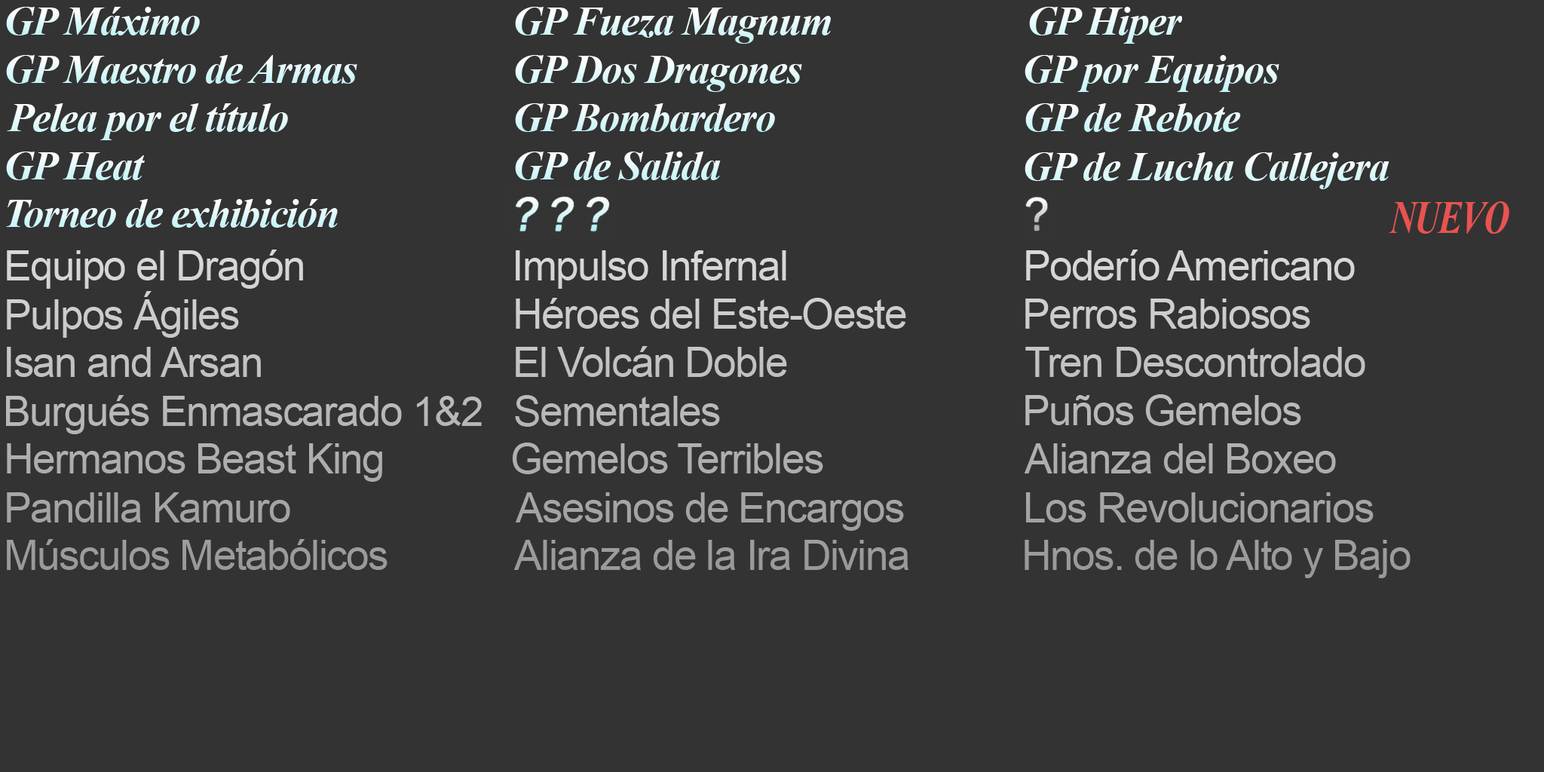
<style>
.page{position:relative;width:1544px;height:772px;background:#333333}
.page>*{position:absolute;margin:0}
.t1{font:41.8px "TimesNewRomanPS-BoldItalicMT";letter-spacing:-0.03em;color:#def9fb}
.t2{font:41.8px "TimesNewRomanPS-BoldItalicMT";letter-spacing:-0.03em;color:#e6fafc}
.t3{font:41.8px "TimesNewRomanPS-BoldItalicMT";letter-spacing:-0.03em;color:#e9fbfc}
.t4{font:41.8px "TimesNewRomanPS-BoldItalicMT";letter-spacing:-0.03em;color:#dcf8fb}
.t5{font:41.8px "TimesNewRomanPS-BoldItalicMT";letter-spacing:-0.03em;color:#e4fafc}
.t6{font:41.5px "TimesNewRomanPS-BoldItalicMT";letter-spacing:-0.03em;color:#dcf8fb}
.t7{font:41.8px "TimesNewRomanPS-BoldItalicMT";letter-spacing:-0.03em}
.t8{font:41.8px "TimesNewRomanPS-BoldItalicMT";letter-spacing:-0.03em;color:#daf8fb}
.t9{font:47.1px "TimesNewRomanPS-BoldItalicMT";letter-spacing:-0.03em;color:#e85350;scale:0.75 1}
.t10{font:41.4px "ArialMT";letter-spacing:-0.03em;color:#d6d6d6}
.t11{font:41.4px "ArialMT";letter-spacing:-0.03em;color:#cccccc}
.t12{font:41.4px "ArialMT";letter-spacing:-0.03em;color:#c2c2c2}
.t13{font:41.4px "ArialMT";letter-spacing:-0.03em;color:#b8b8b8}
.t14{font:41.4px "ArialMT";letter-spacing:-0.03em;color:#aeaeae}
.t15{font:41.4px "ArialMT";letter-spacing:-0.03em;color:#a4a4a4}
.t16{font:41.4px "ArialMT";letter-spacing:-0.03em;color:#9b9b9b}
.t17{font:41.4px "ArialMT";letter-spacing:-0.03em;color:#9a9a9a}
</style>
<div class="page">
<p class="t1" style="left:6px;top:7px;width:194px;height:28px">GP Máximo</p>
<p class="t2" style="left:515px;top:7px;width:316px;height:37px">GP Fueza Magnum</p>
<p class="t3" style="left:1029px;top:7px;width:153px;height:37px">GP Hiper</p>
<p class="t4" style="left:6px;top:55px;width:351px;height:29px">GP Maestro de Armas</p>
<p class="t2" style="left:515px;top:55px;width:287px;height:37px">GP Dos Dragones</p>
<p class="t5" style="left:1025px;top:55px;width:255px;height:37px">GP por Equipos</p>
<p class="t5" style="left:7px;top:103px;width:281px;height:37px">Pelea por el título</p>
<p class="t6" style="left:515px;top:103px;width:260px;height:29px">GP Bombardero</p>
<p class="t1" style="left:1026px;top:103px;width:215px;height:29px">GP de Rebote</p>
<p class="t7" style="left:6px;top:152px;width:139px;height:28px">GP Heat</p>
<p class="t1" style="left:515px;top:152px;width:206px;height:28px">GP de Salida</p>
<p class="t5" style="left:1025px;top:152px;width:365px;height:37px">GP de Lucha Callejera</p>
<p class="t8" style="left:6px;top:199px;width:332px;height:29px">Torneo de exhibición</p>
<p class="t9" style="left:1389px;top:201px;width:121px;height:33px">NUEVO</p>
<p class="t10" style="left:7px;top:250px;width:296px;height:39px">Equipo el Dragón</p>
<p class="t10" style="left:516px;top:250px;width:270px;height:39px">Impulso Infernal</p>
<p class="t10" style="left:1026px;top:250px;width:329px;height:31px">Poderío Americano</p>
<p class="t11" style="left:7px;top:291px;width:232px;height:47px">Pulpos Ágiles</p>
<p class="t11" style="left:516px;top:298px;width:390px;height:32px">Héroes del Este-Oeste</p>
<p class="t11" style="left:1026px;top:299px;width:285px;height:30px">Perros Rabiosos</p>
<p class="t12" style="left:7px;top:347px;width:254px;height:30px">Isan and Arsan</p>
<p class="t12" style="left:516px;top:346px;width:271px;height:31px">El Volcán Doble</p>
<p class="t12" style="left:1026px;top:347px;width:340px;height:30px">Tren Descontrolado</p>
<p class="t13" style="left:6px;top:395px;width:476px;height:39px">Burgués Enmascarado 1&amp;2</p>
<p class="t13" style="left:515px;top:395px;width:205px;height:32px">Sementales</p>
<p class="t13" style="left:1026px;top:394px;width:275px;height:32px">Puños Gemelos</p>
<p class="t14" style="left:7px;top:443px;width:375px;height:39px">Hermanos Beast King</p>
<p class="t14" style="left:512px;top:443px;width:311px;height:31px">Gemelos Terribles</p>
<p class="t14" style="left:1024px;top:443px;width:312px;height:31px">Alianza del Boxeo</p>
<p class="t15" style="left:7px;top:492px;width:283px;height:31px">Pandilla Kamuro</p>
<p class="t15" style="left:515px;top:492px;width:389px;height:39px">Asesinos de Encargos</p>
<p class="t15" style="left:1026px;top:492px;width:348px;height:31px">Los Revolucionarios</p>
<p class="t16" style="left:7px;top:539px;width:381px;height:31px">Músculos Metabólicos</p>
<p class="t17" style="left:514px;top:540px;width:395px;height:30px">Alianza de la Ira Divina</p>
<p class="t16" style="left:1025px;top:540px;width:386px;height:38px">Hnos. de lo Alto y Bajo</p>
</div>
